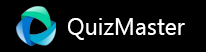
<style>
.page{position:relative;width:206px;height:52px;background:#000000}
.page>*{position:absolute;margin:0}
.t1{font:23.6px "SegoeUI";color:#ffffff}
</style>
<div class="page">
<p class="t1" style="left:68px;top:18px;width:117px;height:22px">QuizMaster</p>
</div>
